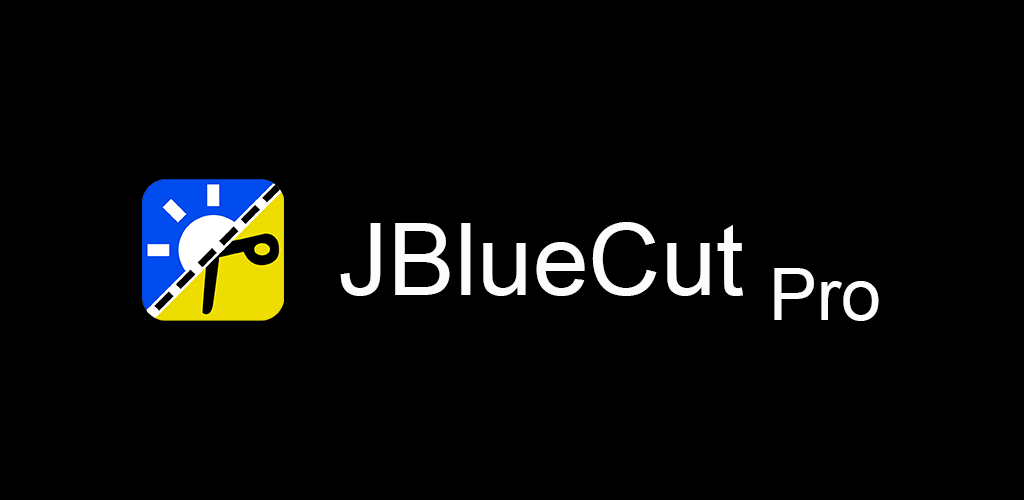
<style>
.page{position:relative;width:1024px;height:500px;background:#000000}
.page>*{position:absolute;margin:0}
.t1{font:100px "ArialMT";color:#fcfcfc}
.t2{font:72px "ArialMT";color:#fcfcfc}
</style>
<div class="page">
<p class="t1" style="left:340px;top:222px;width:403px;height:74px">JBlueCut</p>
<p class="t2" style="left:774px;top:268px;width:105px;height:53px">Pro</p>
</div>
